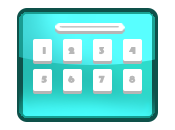
<style>
.page{position:relative;width:175px;height:130px;background:#ffffff}
.page>*{position:absolute;margin:0}
.t1{font:9.6px "Bauhaus93";color:#b7b7b7;font-weight:bold;scale:1.25 1}
</style>
<div class="page">
<p class="t1" style="left:41px;top:47px;width:95px;height:36px">1      2       3       4<br><br>5      6       7       8</p>
</div>
